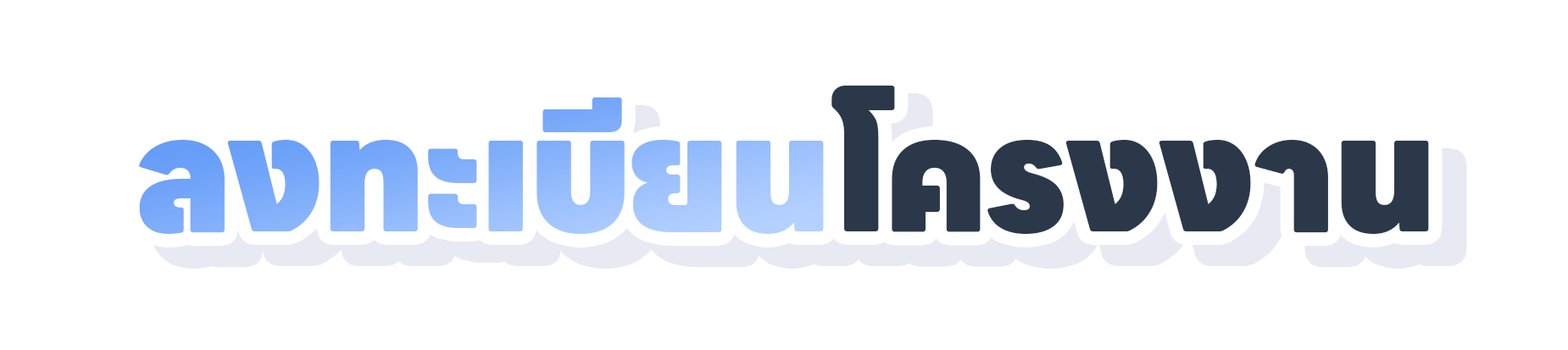
<style>
.page{position:relative;width:1568px;height:350px;background:#ffffff}
.page>*{position:absolute;margin:0}
.t1{font:152.6px "LINESeedSansTH-Heavy";letter-spacing:-0.02em}
</style>
<div class="page">
<p class="t1" style="left:139px;top:86px;width:1290px;height:148px">ลงทะเบียนโครงงาน</p>
</div>
